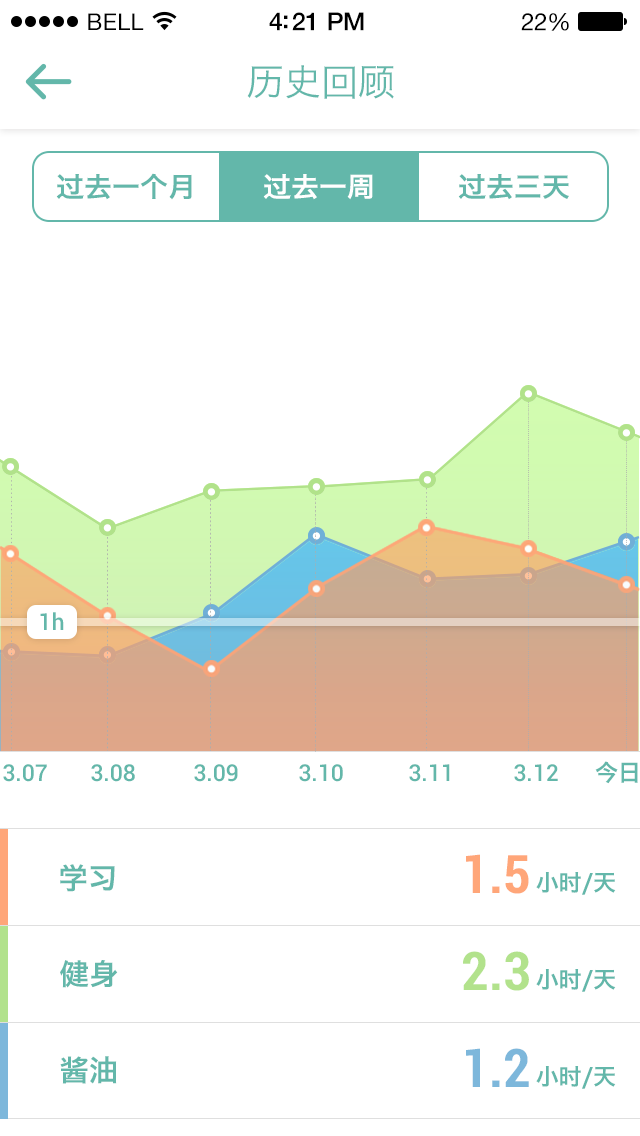
<style>
.page{position:relative;width:640px;height:1136px;background:#ffffff}
.page>*{position:absolute;margin:0}
.t1{font:23px "HelveticaNeue";letter-spacing:0.02em;color:#000000}
.t2{font:25px "HelveticaNeue-Medium";letter-spacing:-0.02em;color:#000000}
.t3{font:24px "HelveticaNeue";letter-spacing:-0.02em;color:#000000}
.t4{font:37.3px "HiraginoSansGB-W3";color:#63b7aa}
.t5{font:27.5px "HiraginoSansGB-W6";color:#63b7aa}
.t6{font:27.5px "HiraginoSansGB-W6";color:#ffffff}
.t7{font:22.9px "Roboto-Medium";color:#63b7aa}
.t8{font:23px "HiraginoSansGB-W6";color:#63b7aa}
.t9{font:23px "Roboto-Medium";color:#63b7aa}
.t10{font:53.3px "Roboto-BoldCondensed";color:#ffa679}
.t11{font:29.4px "HiraginoSansGB-W6";color:#63b7aa}
.t12{font:53.3px "Roboto-BoldCondensed";color:#b2e28c}
.t13{font:53.3px "Roboto-BoldCondensed";color:#7db7db}
</style>
<div class="page">
<p class="t1" style="left:88px;top:13px;width:56px;height:17px">BELL</p>
<p class="t2" style="left:269px;top:12px;width:95px;height:19px">4:21 PM</p>
<p class="t3" style="left:521px;top:13px;width:48px;height:18px">22%</p>
<p class="t4" style="left:247px;top:65px;width:147px;height:34px">历史回顾</p>
<p class="t5" style="left:56px;top:173px;width:136px;height:27px">过去一个月</p>
<p class="t6" style="left:263px;top:174px;width:110px;height:26px">过去一周</p>
<p class="t5" style="left:458px;top:174px;width:111px;height:26px">过去三天</p>
<p class="t7" style="left:40px;top:612px;width:24px;height:18px">1h</p>
<p class="t8" style="left:595px;top:761px;width:43px;height:23px">今日</p>
<p class="t9" style="left:3px;top:764px;width:44px;height:18px">3.07</p>
<p class="t9" style="left:91px;top:764px;width:44px;height:18px">3.08</p>
<p class="t9" style="left:194px;top:764px;width:44px;height:18px">3.09</p>
<p class="t9" style="left:299px;top:764px;width:44px;height:18px">3.10</p>
<p class="t9" style="left:409px;top:764px;width:41px;height:18px">3.11</p>
<p class="t9" style="left:514px;top:764px;width:44px;height:18px">3.12</p>
<p class="t10" style="left:466px;top:854px;width:63px;height:40px">1.5</p>
<p class="t11" style="left:60px;top:864px;width:55px;height:28px">学习</p>
<p class="t8" style="left:536px;top:872px;width:80px;height:23px">小时/天</p>
<p class="t12" style="left:463px;top:951px;width:66px;height:40px">2.3</p>
<p class="t11" style="left:60px;top:960px;width:58px;height:28px">健身</p>
<p class="t8" style="left:536px;top:969px;width:80px;height:23px">小时/天</p>
<p class="t13" style="left:466px;top:1048px;width:63px;height:39px">1.2</p>
<p class="t11" style="left:60px;top:1056px;width:57px;height:28px">酱油</p>
<p class="t8" style="left:536px;top:1066px;width:80px;height:23px">小时/天</p>
</div>
